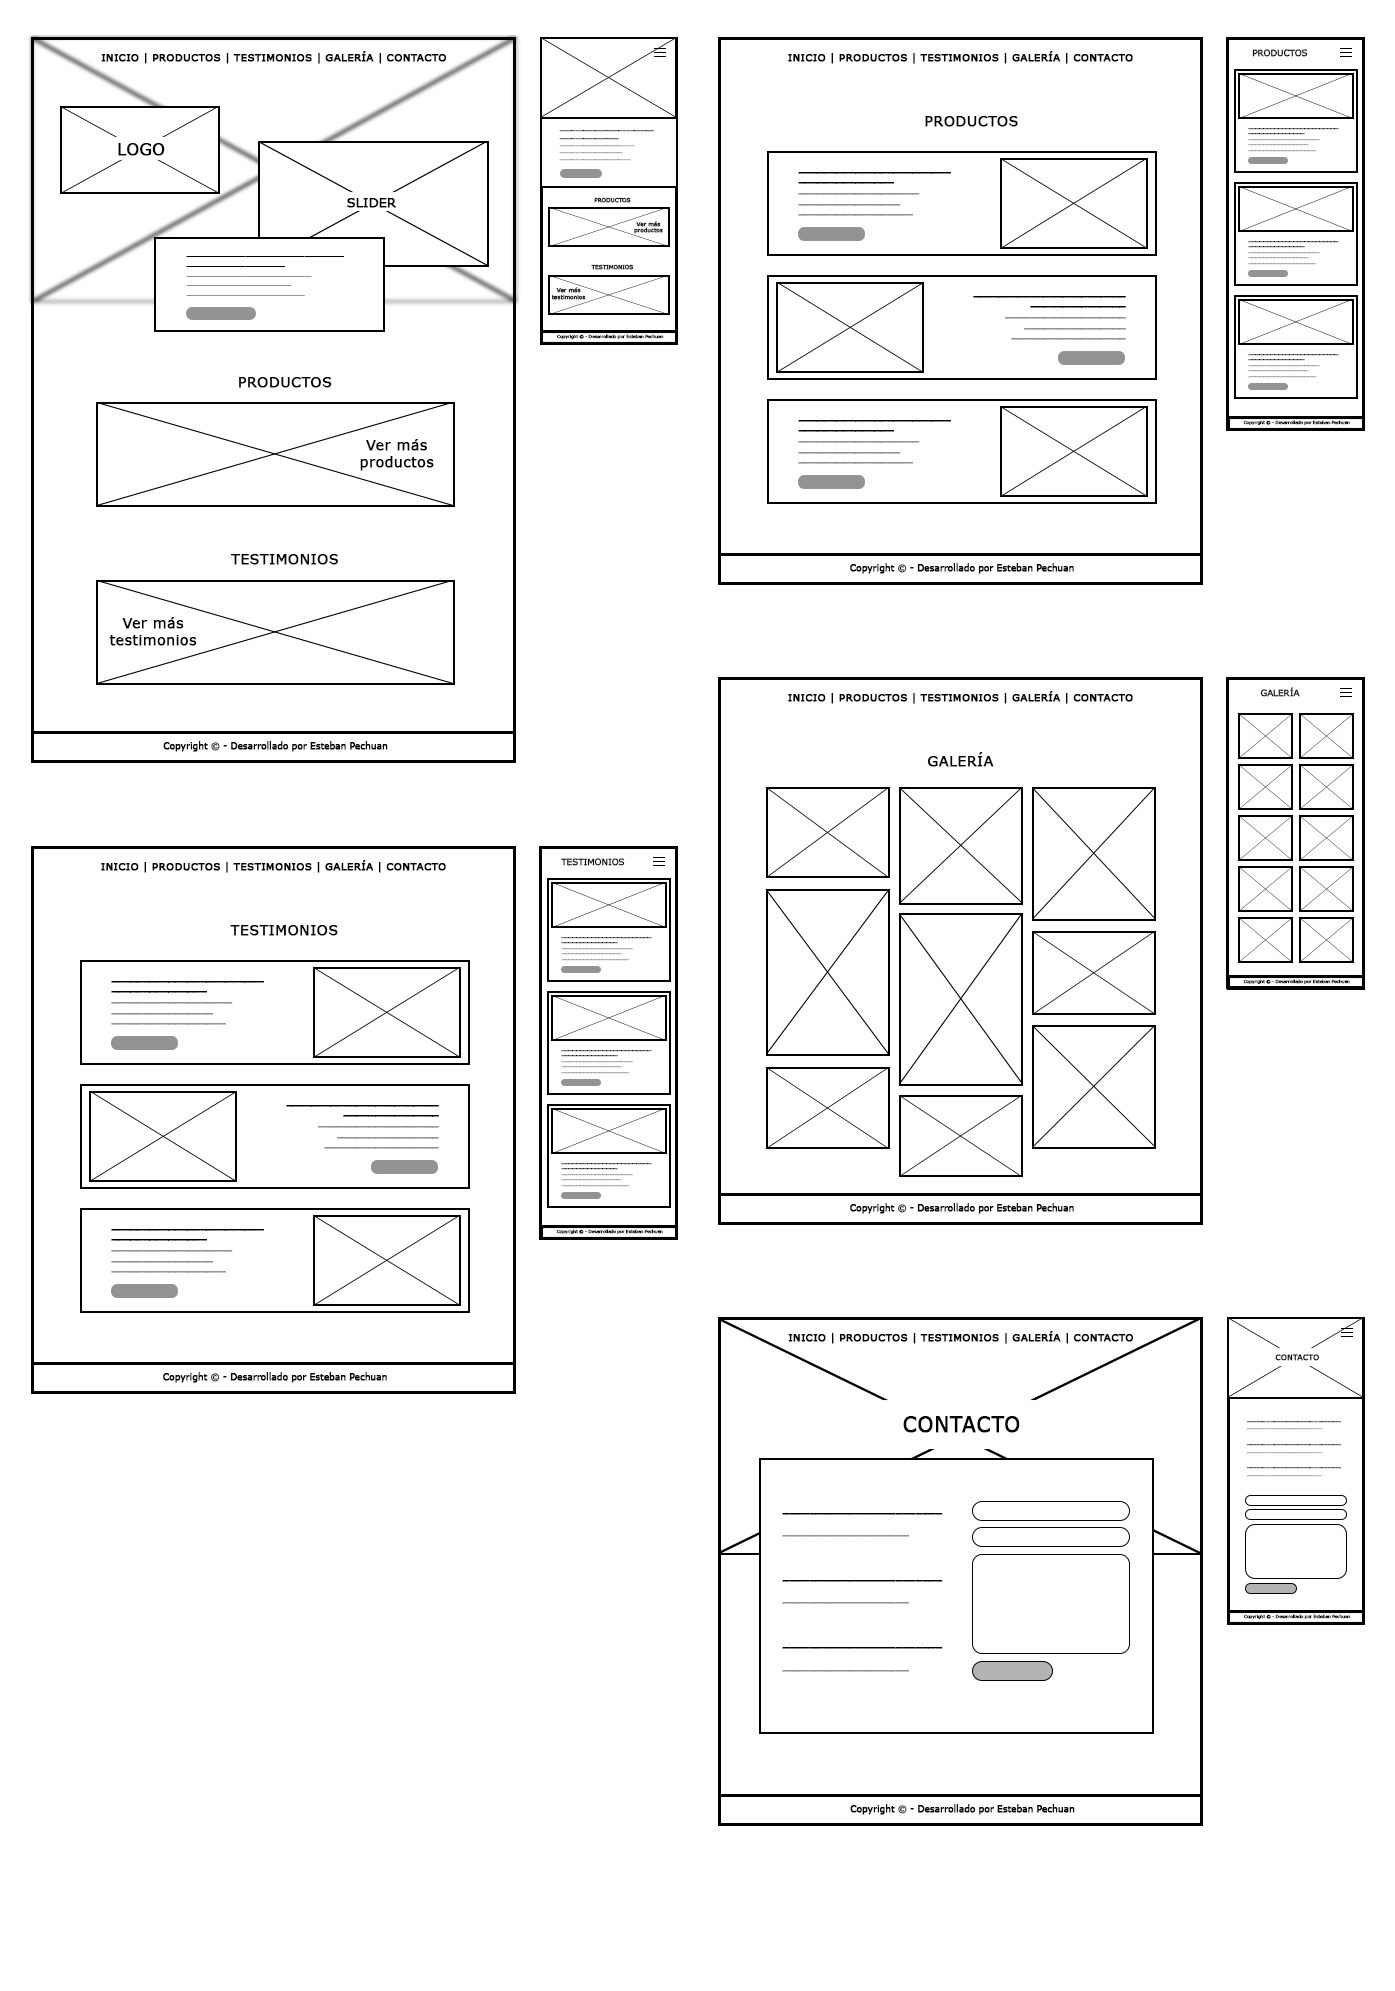
<style>
.page{position:relative;width:1395px;height:1991px;background:#ffffff}
.page>*{position:absolute;margin:0}
.t1{font:10.4px "Verdana";color:#000000;font-weight:bold}
.t2{font:8.4px "Verdana";color:#000000;font-weight:bold}
.t3{font:14.3px "Verdana";color:#000000;font-weight:bold}
.t4{font:6px "Verdana";color:#939393;font-weight:bold}
.t5{font:6px "Verdana";color:#000000;font-weight:bold}
.t6{font:4.6px "Verdana";color:#939393;font-weight:bold;scale:1.23 1}
.t7{font:4.6px "Verdana";color:#000000;font-weight:bold;scale:1.23 1}
.t8{font:15.5px "Verdana";color:#000000;font-weight:bold}
.t9{font:8.9px "Verdana";color:#939393;font-weight:bold;scale:1.07 1}
.t10{font:8.9px "Verdana";color:#000000;font-weight:bold;scale:1.07 1}
.t11{font:12.6px "Verdana";color:#000000;font-weight:bold}
.t12{font:5.4px "Verdana";font-weight:bold}
.t13{font:5.4px "Verdana";color:#000000;font-weight:bold}
.t14{font:8.1px "Verdana";color:#939393;font-weight:bold;scale:1.22 1}
.t15{font:8.1px "Verdana";color:#000000;font-weight:bold;scale:1.22 1}
.t16{font:4px "Verdana";color:#000000;font-weight:bold;scale:1.03 1}
.t17{font:8.7px "Verdana";color:#000000;font-weight:bold}
.t18{font:7.6px "Verdana";color:#000000;font-weight:bold}
.t19{font:20.6px "Verdana";color:#000000;font-weight:bold}
.t20{font:6.5px "Verdana";color:#000000;font-weight:bold;scale:0.91 1}
.t21{font:6.5px "Verdana";color:#939393;font-weight:bold;scale:0.91 1}
.t22{font:18.7px "Verdana";color:#000000;font-weight:bold;scale:0.54 1}
.t23{font:18.7px "Verdana";color:#939393;font-weight:bold;scale:0.54 1}
</style>
<div class="page">
<p class="t1" style="left:101px;top:51px;width:345px;height:13px">INICIO | PRODUCTOS | TESTIMONIOS | GALERÍA | CONTACTO</p>
<p class="t1" style="left:788px;top:51px;width:345px;height:13px">INICIO | PRODUCTOS | TESTIMONIOS | GALERÍA | CONTACTO</p>
<p class="t2" style="left:1252px;top:49px;width:56px;height:8px">PRODUCTOS</p>
<p class="t3" style="left:925px;top:116px;width:93px;height:11px">PRODUCTOS</p>
<p class="t4" style="left:559px;top:130px;width:96px;height:31px"><span class="t5">________________________<br>_______________<br></span>___________________<br>________________<br>__________________</p>
<p class="t6" style="left:1248px;top:128px;width:91px;height:24px"><span class="t7">________________________<br>_______________<br></span>___________________<br>________________<br>__________________</p>
<p class="t8" style="left:118px;top:143px;width:47px;height:13px">LOGO</p>
<p class="t9" style="left:798px;top:172px;width:153px;height:44px"><span class="t10">________________________<br>_______________<br></span>___________________<br>________________<br>__________________</p>
<p class="t11" style="left:347px;top:198px;width:50px;height:10px">SLIDER</p>
<p class="t12" style="left:594px;top:197px;width:37px;height:6px">PRODUCTOS</p>
<p class="t13" style="left:634px;top:221px;width:29px;height:13px;text-align:center">Ver más productos</p>
<p class="t6" style="left:1248px;top:241px;width:91px;height:24px"><span class="t7">________________________<br>_______________<br></span>___________________<br>________________<br>__________________</p>
<p class="t14" style="left:186px;top:256px;width:158px;height:40px"><span class="t15">________________________<br>_______________<br></span>___________________<br>________________<br>__________________</p>
<p class="t12" style="left:591px;top:264px;width:43px;height:6px">TESTIMONIOS</p>
<p class="t13" style="left:551px;top:287px;width:35px;height:13px;text-align:center">Ver más testimonios</p>
<p class="t9" style="left:973px;top:296px;width:153px;height:44px;rotate:180deg"><span class="t10">________________________<br>_______________<br></span>___________________<br>________________<br>__________________</p>
<p class="t16" style="left:557px;top:334px;width:107px;height:5px">Copyright © - Desarrollado por Esteban Pechuan</p>
<p class="t6" style="left:1248px;top:354px;width:91px;height:24px"><span class="t7">________________________<br>_______________<br></span>___________________<br>________________<br>__________________</p>
<p class="t3" style="left:239px;top:377px;width:93px;height:11px">PRODUCTOS</p>
<p class="t9" style="left:798px;top:420px;width:153px;height:44px"><span class="t10">________________________<br>_______________<br></span>___________________<br>________________<br>__________________</p>
<p class="t16" style="left:1243px;top:420px;width:107px;height:5px">Copyright © - Desarrollado por Esteban Pechuan</p>
<p class="t3" style="left:360px;top:439px;width:74px;height:32px;text-align:center">Ver más productos</p>
<p class="t3" style="left:230px;top:554px;width:108px;height:11px">TESTIMONIOS</p>
<p class="t17" style="left:850px;top:563px;width:224px;height:11px">Copyright © - Desarrollado por Esteban Pechuan</p>
<p class="t3" style="left:109px;top:617px;width:88px;height:29px;text-align:center">Ver más testimonios</p>
<p class="t2" style="left:1260px;top:687px;width:40px;height:10px">GALERÍA</p>
<p class="t1" style="left:788px;top:691px;width:345px;height:13px">INICIO | PRODUCTOS | TESTIMONIOS | GALERÍA | CONTACTO</p>
<p class="t17" style="left:163px;top:741px;width:225px;height:11px">Copyright © - Desarrollado por Esteban Pechuan</p>
<p class="t3" style="left:927px;top:752px;width:67px;height:15px">GALERÍA</p>
<p class="t1" style="left:101px;top:860px;width:345px;height:13px">INICIO | PRODUCTOS | TESTIMONIOS | GALERÍA | CONTACTO</p>
<p class="t2" style="left:561px;top:858px;width:64px;height:8px">TESTIMONIOS</p>
<p class="t3" style="left:230px;top:925px;width:108px;height:11px">TESTIMONIOS</p>
<p class="t6" style="left:561px;top:937px;width:91px;height:24px"><span class="t7">________________________<br>_______________<br></span>___________________<br>________________<br>__________________</p>
<p class="t9" style="left:111px;top:981px;width:153px;height:44px"><span class="t10">________________________<br>_______________<br></span>___________________<br>________________<br>__________________</p>
<p class="t16" style="left:1243px;top:979px;width:107px;height:5px">Copyright © - Desarrollado por Esteban Pechuan</p>
<p class="t6" style="left:561px;top:1050px;width:91px;height:24px"><span class="t7">________________________<br>_______________<br></span>___________________<br>________________<br>__________________</p>
<p class="t9" style="left:286px;top:1105px;width:153px;height:44px;rotate:180deg"><span class="t10">________________________<br>_______________<br></span>___________________<br>________________<br>__________________</p>
<p class="t6" style="left:561px;top:1163px;width:91px;height:24px"><span class="t7">________________________<br>_______________<br></span>___________________<br>________________<br>__________________</p>
<p class="t17" style="left:850px;top:1203px;width:224px;height:11px">Copyright © - Desarrollado por Esteban Pechuan</p>
<p class="t9" style="left:111px;top:1229px;width:153px;height:44px"><span class="t10">________________________<br>_______________<br></span>___________________<br>________________<br>__________________</p>
<p class="t16" style="left:556px;top:1229px;width:107px;height:5px">Copyright © - Desarrollado por Esteban Pechuan</p>
<p class="t1" style="left:788px;top:1331px;width:345px;height:13px">INICIO | PRODUCTOS | TESTIMONIOS | GALERÍA | CONTACTO</p>
<p class="t18" style="left:1275px;top:1354px;width:44px;height:7px">CONTACTO</p>
<p class="t17" style="left:163px;top:1372px;width:224px;height:11px">Copyright © - Desarrollado por Esteban Pechuan</p>
<p class="t19" style="left:903px;top:1416px;width:117px;height:17px">CONTACTO</p>
<p class="t20" style="left:1246px;top:1421px;width:96px;height:56px">________________________<br><span class="t21">___________________<br><br></span>________________________<br><span class="t21">___________________<br><br></span>________________________<br><span class="t21">___________________</span></p>
<p class="t22" style="left:782px;top:1513px;width:161px;height:159px">________________________<br><span class="t23">___________________<br><br></span>________________________<br><span class="t23">___________________<br><br></span>________________________<br><span class="t23">___________________</span></p>
<p class="t16" style="left:1244px;top:1614px;width:107px;height:5px">Copyright © - Desarrollado por Esteban Pechuan</p>
<p class="t17" style="left:850px;top:1804px;width:225px;height:11px">Copyright © - Desarrollado por Esteban Pechuan</p>
</div>
